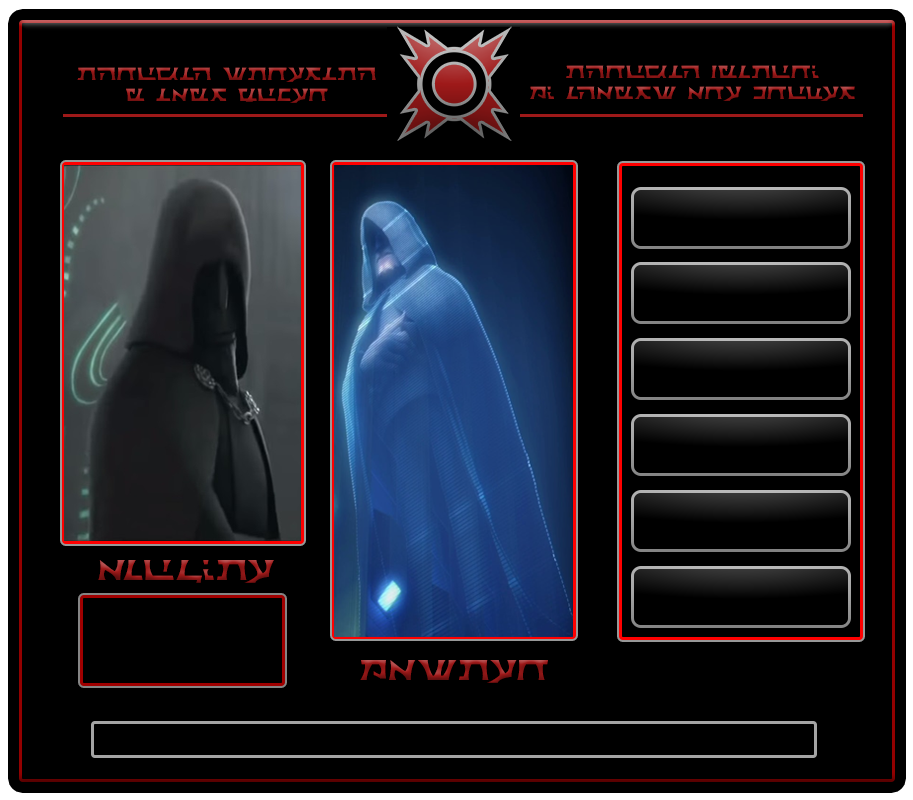
<style>
.page{position:relative;width:913px;height:800px;background:#000000}
.page>*{position:absolute;margin:0}
.t1{font:17.5px "Sith-Prophecy"}
.t2{font:28.6px "Sith-Prophecy"}
</style>
<div class="page">
<p class="t1" style="left:530px;top:65px;width:325px;height:36px;text-align:center">Through Victory<br>My chains are broken</p>
<p class="t1" style="left:77px;top:67px;width:299px;height:36px;text-align:center">Through Strength<br>I gain power</p>
<p class="t2" style="left:98px;top:560px;width:176px;height:23px">Acolyte</p>
<p class="t2" style="left:360px;top:660px;width:188px;height:23px">Master</p>
</div>
